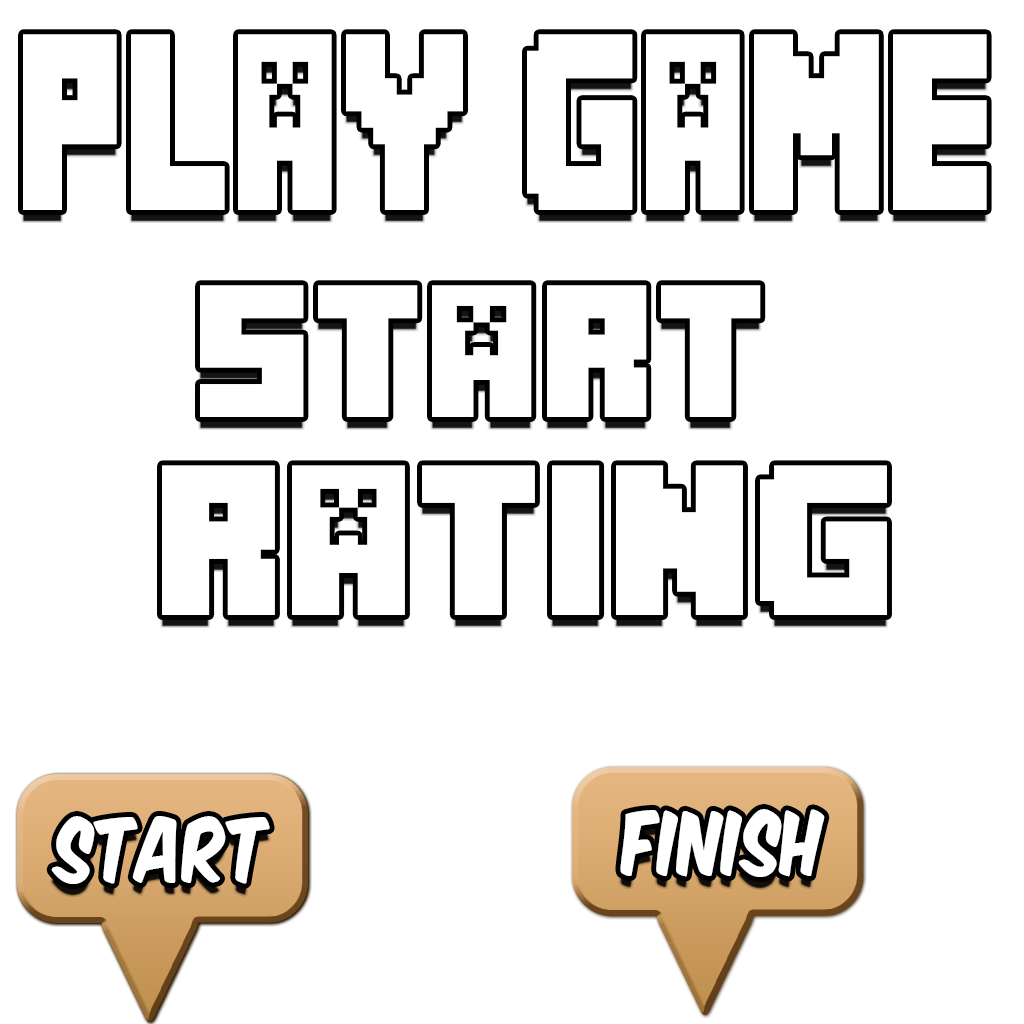
<style>
.page{position:relative;width:1024px;height:1024px;background:#ffffff}
.page>*{position:absolute;margin:0}
.t1{font:175.7px "MineCrafter-3";letter-spacing:0.02em;color:#ffffff;scale:0.71 1}
.t2{font:131.7px "MineCrafter-3";letter-spacing:0.02em;color:#ffffff}
.t3{font:149.5px "MineCrafter-3";letter-spacing:0.02em;color:#ffffff}
.t4{font:74.8px "KomikaPlanes";letter-spacing:0.02em;color:#ffffff;scale:0.82 1}
</style>
<div class="page">
<p class="t1" style="left:23px;top:34px;width:964px;height:176px">PLAY GAME</p>
<p class="t2" style="left:200px;top:285px;width:561px;height:132px">START</p>
<p class="t3" style="left:162px;top:465px;width:725px;height:150px">RATING</p>
<p class="t4" style="left:620px;top:809px;width:205px;height:68px">FINISH</p>
<p class="t4" style="left:51px;top:816px;width:219px;height:68px">START</p>
</div>
